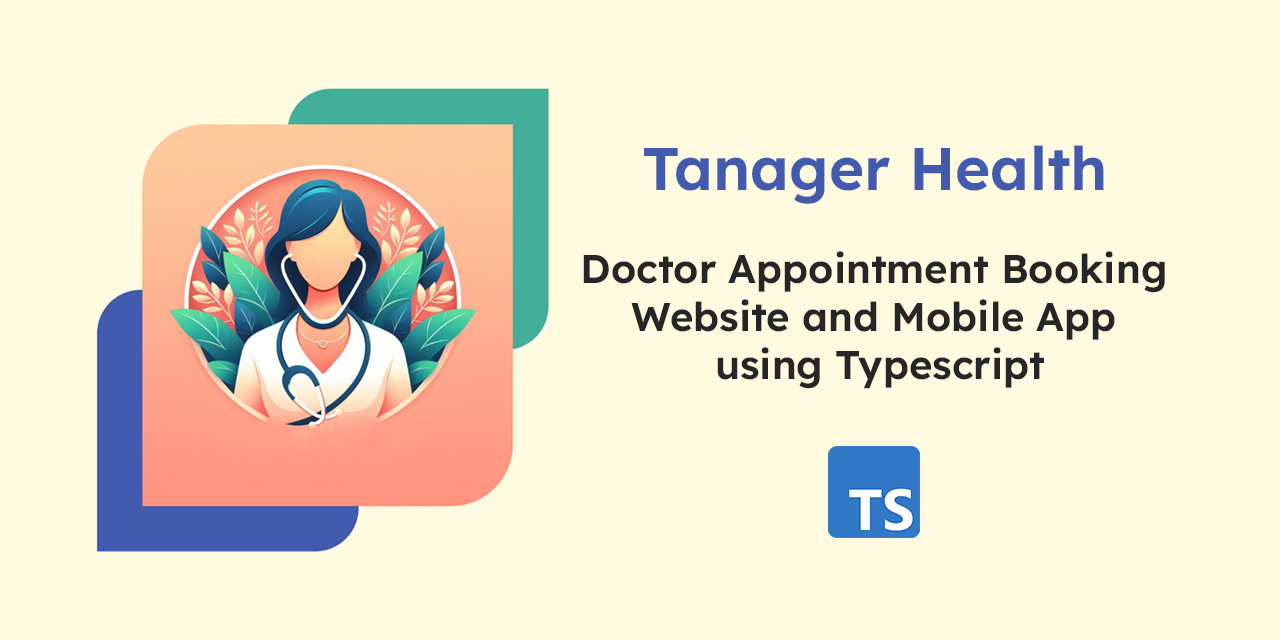
<style>
.page{position:relative;width:1280px;height:640px;background:#fffae0}
.page>*{position:absolute;margin:0}
.t1{font:60px "Lexend-SemiBold";color:#425baf}
.t2{font:40px "Lexend-SemiBold";color:#262626}
</style>
<div class="page">
<p class="t1" style="left:644px;top:145px;width:460px;height:59px">Tanager Health</p>
<p class="t2" style="left:583px;top:251px;width:582px;height:138px;text-align:center">Doctor Appointment Booking <br>Website and Mobile App <br>using Typescript</p>
</div>
